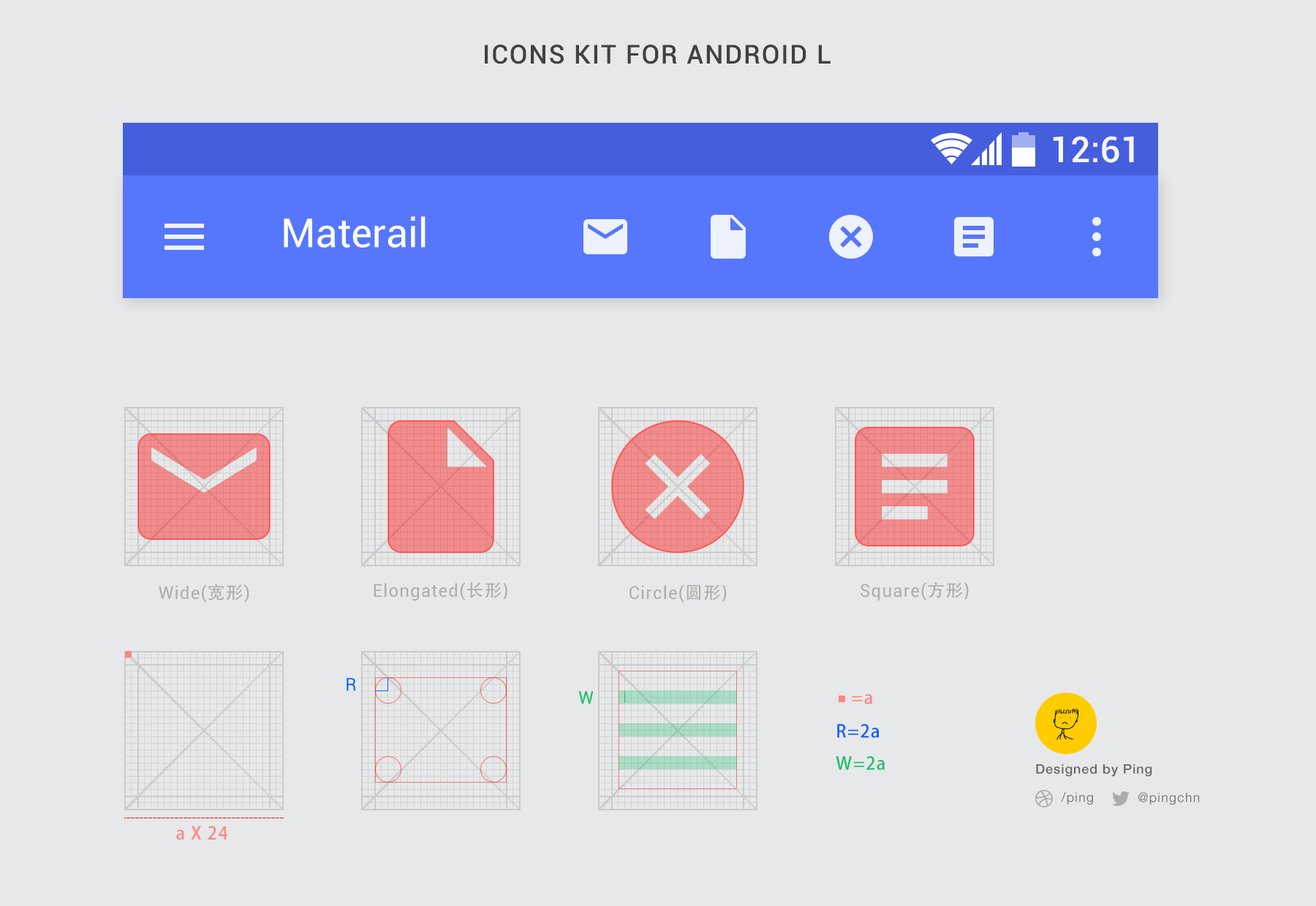
<style>
.page{position:relative;width:1316px;height:906px;background:#e7e8e9}
.page>*{position:absolute;margin:0}
.t1{font:26.3px "Roboto-Medium";letter-spacing:0.05em;color:#414141;text-transform:uppercase}
.t2{font:35.8px "Roboto-Medium";color:#f5f5f5}
.t3{font:40px "Roboto-Regular";color:#ffffff}
.t4{font:17.5px "Roboto-Regular";letter-spacing:0.05em;color:#adadad}
.t5{font:17.5px "AdobeHeitiStd-Regular";letter-spacing:0.05em;color:#adadad}
.t6{font:17.5px "Roboto-Regular";letter-spacing:0.05em;color:#0060ff}
.t7{font:17.5px "Roboto-Regular";letter-spacing:0.05em;color:#15c26f}
.t8{font:17.5px "AdobeHeitiStd-Regular";letter-spacing:0.05em;color:#ff8585}
.t9{font:17.5px "AdobeHeitiStd-Regular";letter-spacing:0.05em;color:#0060ff}
.t10{font:17.5px "AdobeHeitiStd-Regular";letter-spacing:0.05em;color:#15c26f}
.t11{font:13.2px "HelveticaNeue-Medium";letter-spacing:0.05em;color:#626262}
.t12{font:13.2px "HelveticaNeue";letter-spacing:0.05em;color:#797a7a}
</style>
<div class="page">
<p class="t1" style="left:485px;top:45px;width:345px;height:19px">Icons kit for Android L</p>
<p class="t2" style="left:1053px;top:136px;width:81px;height:27px">12:61</p>
<p class="t3" style="left:284px;top:216px;width:141px;height:32px">Materail</p>
<p class="t4" style="left:860px;top:582px;width:108px;height:19px">Square(<span class="t5">方形)</span></p>
<p class="t4" style="left:159px;top:584px;width:90px;height:19px">Wide(<span class="t5">宽形</span>)</p>
<p class="t4" style="left:374px;top:583px;width:133px;height:18px">Elongated(<span class="t5">长形)</span></p>
<p class="t4" style="left:629px;top:585px;width:98px;height:18px">Circle(<span class="t5">圆形)</span></p>
<p class="t6" style="left:346px;top:678px;width:10px;height:13px">R</p>
<p class="t7" style="left:578px;top:691px;width:16px;height:14px">W</p>
<p class="t8" style="left:852px;top:694px;width:20px;height:11px">=a</p>
<p class="t9" style="left:837px;top:724px;width:42px;height:14px">R=2a</p>
<p class="t10" style="left:835px;top:757px;width:49px;height:13px">W=2a</p>
<p class="t11" style="left:1036px;top:765px;width:116px;height:12px">Designed by Ping</p>
<p class="t12" style="left:1061px;top:792px;width:32px;height:13px">/ping</p>
<p class="t12" style="left:1138px;top:792px;width:61px;height:13px">@pingchn</p>
<p class="t8" style="left:176px;top:826px;width:52px;height:15px">a X 24</p>
</div>
